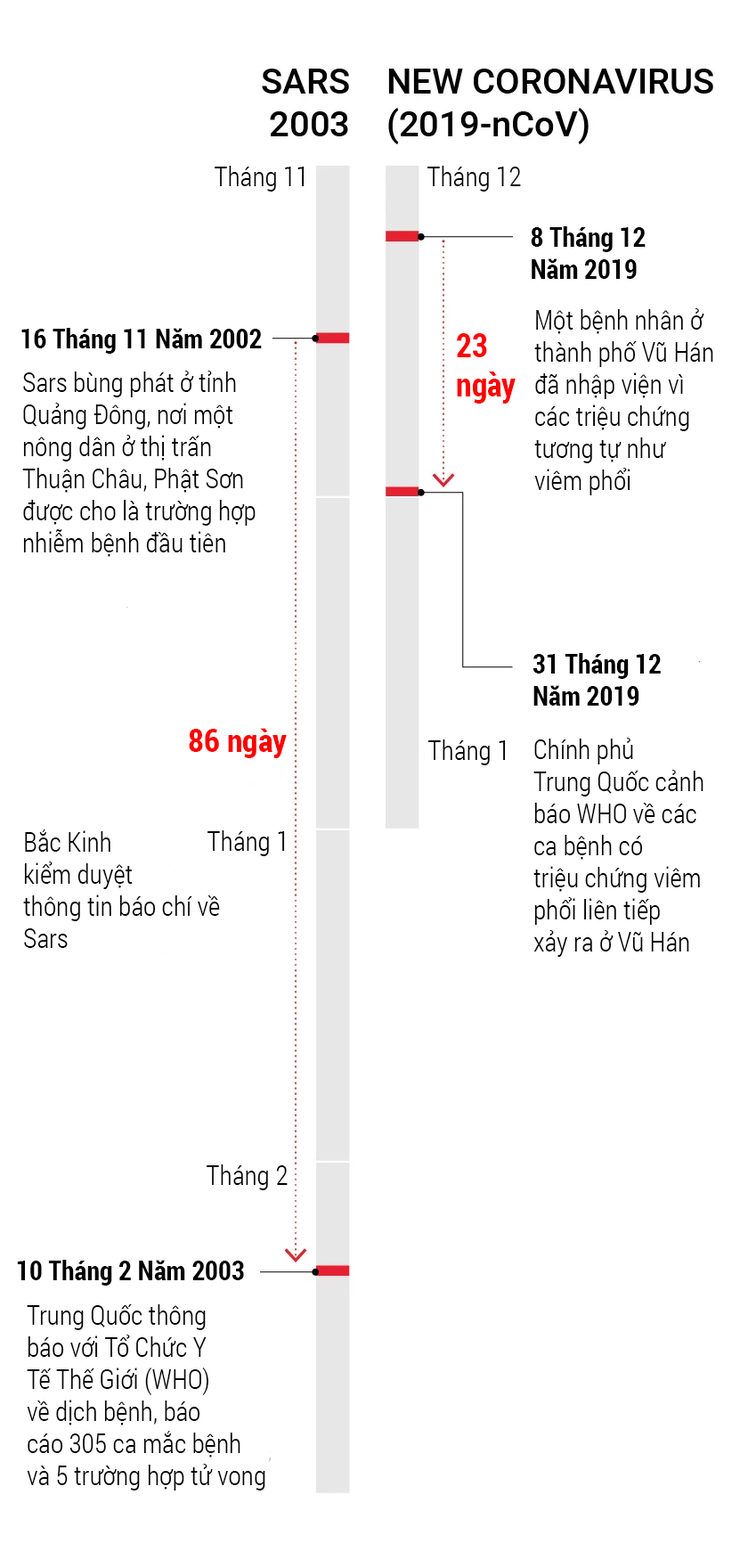
<style>
.page{position:relative;width:748px;height:1568px;background:#ffffff}
.page>*{position:absolute;margin:0}
.t1{font:26.7px "RobotoCondensed-Light";color:#000000}
.t2{font:26.7px "RobotoCondensed-Bold";color:#000000}
.t3{font:26.8px "RobotoCondensed-Light";color:#000000}
.t4{font:32.6px "RobotoCondensed-Bold";color:#ff0000}
.t5{font:26.8px "RobotoCondensed-Bold";color:#000000}
.t6{font:32.4px "RobotoCondensed-Bold";color:#ff0000}
</style>
<div class="page">
<p class="t1" style="left:215px;top:166px;width:90px;height:26px">Tháng 11</p>
<p class="t1" style="left:428px;top:166px;width:93px;height:26px">Tháng 12</p>
<p class="t2" style="left:531px;top:226px;width:115px;height:53px">8 Tháng 12<br>Năm 2019</p>
<p class="t3" style="left:535px;top:308px;width:179px;height:187px">Một bệnh nhân ở<br>thành phố Vũ Hán<br>đã nhập viện vì<br>các triệu chứng<br>tương tự như<br>viêm phổi</p>
<p class="t2" style="left:21px;top:328px;width:241px;height:26px">16 Tháng 11 Năm 2002</p>
<p class="t4" style="left:457px;top:333px;width:59px;height:71px">23<br>ngày</p>
<p class="t3" style="left:22px;top:371px;width:234px;height:186px">Sars bùng phát ở tỉnh <br>Quảng Đông, nơi một <br>nông dân ở thị trấn <br>Thuận Châu, Phật Sơn <br>được cho là trường hợp <br>nhiễm bệnh đầu tiên</p>
<p class="t5" style="left:533px;top:653px;width:128px;height:53px">31 Tháng 12<br>Năm 2019</p>
<p class="t6" style="left:189px;top:728px;width:98px;height:30px">86 ngày</p>
<p class="t3" style="left:534px;top:738px;width:170px;height:219px">Chính phủ<br>Trung Quốc cảnh <br>báo WHO về các<br>ca bệnh có <br>triệu chứng viêm<br>phổi liên tiếp <br>xảy ra ở Vũ Hán</p>
<p class="t1" style="left:429px;top:739px;width:77px;height:26px">Tháng 1</p>
<p class="t3" style="left:23px;top:829px;width:197px;height:119px">Bắc Kinh<br>kiểm duyệt<br>thông tin báo chí về<br>Sars</p>
<p class="t1" style="left:208px;top:830px;width:77px;height:26px">Tháng 1</p>
<p class="t1" style="left:207px;top:1164px;width:81px;height:26px">Tháng 2</p>
<p class="t2" style="left:17px;top:1260px;width:227px;height:26px">10 Tháng 2 Năm 2003</p>
<p class="t3" style="left:27px;top:1304px;width:238px;height:186px">Trung Quốc thông<br>báo với Tổ Chức Y<br>Tế Thế Giới (WHO)<br>về dịch bệnh, báo<br>cáo 305 ca mắc bệnh<br>và 5 trường hợp tử vong</p>
</div>
